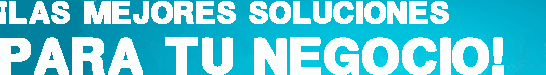
<style>
.page{position:relative;width:546px;height:75px;background:#fcfdfd}
.page>*{position:absolute;margin:0}
.t1{font:36px "PLZ-Regular";letter-spacing:-0.01em;color:#fcfdfd;font-weight:bold}
.t2{font:60px "PLZ-Regular";letter-spacing:-0.01em;color:#fcfdfd;font-weight:bold}
</style>
<div class="page">
<p class="t1" style="left:0px;top:1px;width:449px;height:23px">¡LAS MEJORES SOLUCIONES</p>
<p class="t2" style="left:0px;top:37px;width:504px;height:39px">PARA TU NEGOCIO!</p>
</div>
